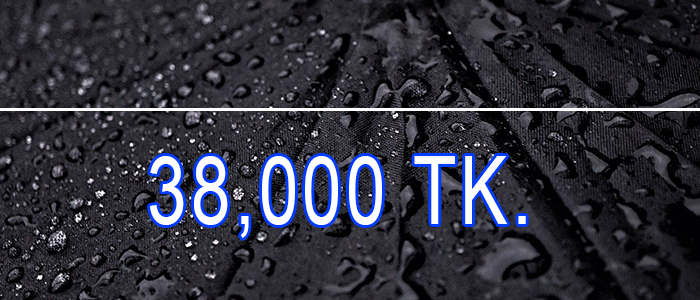
<style>
.page{position:relative;width:700px;height:300px}
.page>*{position:absolute;margin:0}
.t1{font:93.8px "ArialMT";letter-spacing:0.06em;color:#ffffff;scale:0.76 1}
</style>
<div class="page">
<p class="t1" style="left:150px;top:156px;width:376px;height:82px">38,000 TK.</p>
</div>
